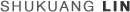
<style>
.page{position:relative;width:130px;height:12px;background:#ffffff}
.page>*{position:absolute;margin:0}
.t1{font:14px "HelveticaNeue-Light";letter-spacing:0.15em;color:#565656;font-weight:bold}
.t2{font:14px "HelveticaNeue-Bold";letter-spacing:0.15em;color:#333333;font-weight:bold}
</style>
<div class="page">
<p class="t1" style="left:0px;top:0px;width:130px;height:12px">SHUKUANG <span class="t2">LIN</span></p>
</div>
